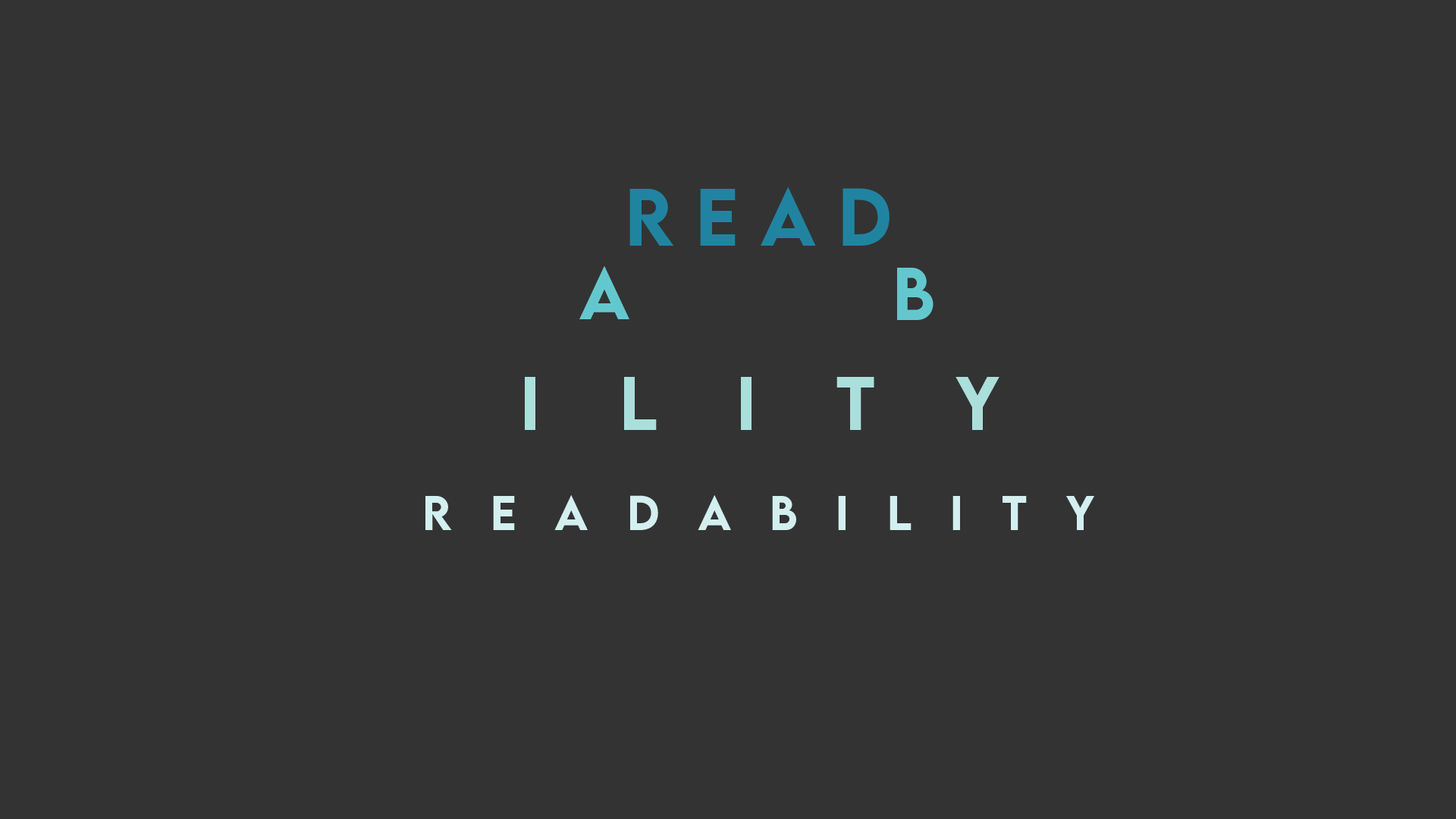
<style>
.page{position:relative;width:1456px;height:819px;background:#333333}
.page>*{position:absolute;margin:0}
.t1{font:72.7px "LEMONMILK-Medium";color:#2084a1}
.t2{font:66px "LEMONMILK-Medium";color:#63c8ce}
.t3{font:67.5px "LEMONMILK-Medium";color:#abdfdb}
.t4{font:43.7px "LEMONMILK-Medium";color:#d3eff0}
</style>
<div class="page">
<p class="t1" style="left:629px;top:187px;width:261px;height:59px">R e a d</p>
<p class="t2" style="left:579px;top:266px;width:50px;height:53px">A</p>
<p class="t2" style="left:897px;top:268px;width:36px;height:52px">B</p>
<p class="t3" style="left:525px;top:377px;width:474px;height:53px">i    l    i    t    y</p>
<p class="t4" style="left:425px;top:495px;width:669px;height:35px">R   e   a   d   a   b   i   l   i   t   y</p>
</div>
